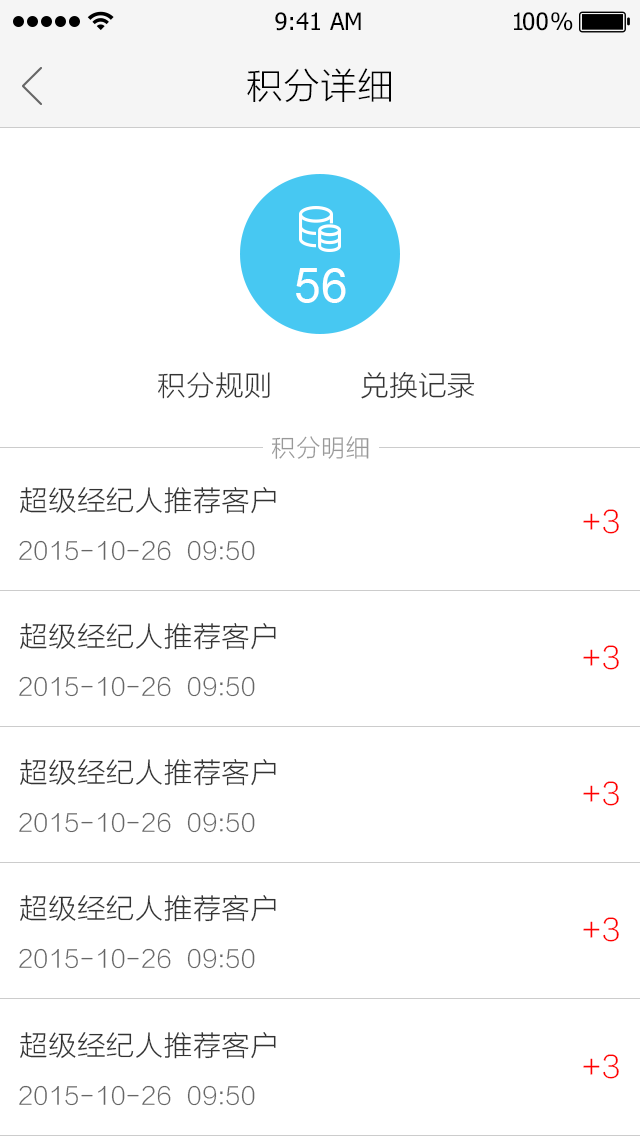
<style>
.page{position:relative;width:640px;height:1136px;background:#ffffff}
.page>*{position:absolute;margin:0}
.t1{font:24px "Tahoma";color:#000000}
.t2{font:24px "Tahoma";letter-spacing:-0.1em;color:#000000}
.t3{font:24px "Tahoma";letter-spacing:-0.25em;color:#000000}
.t4{font:36px "STHeitiSC-Light";color:#000000}
.t5{font:48px "ArialMT";color:#ffffff}
.t6{font:28px "STHeitiSC-Light";color:#333333}
.t7{font:24px "STHeitiSC-Light";color:#999999}
.t8{font:30px "STHeitiSC-Light";color:#ff0000}
.t9{font:24px "STHeitiSC-Light";color:#666666}
</style>
<div class="page">
<p class="t1" style="left:275px;top:12px;width:86px;height:19px">9:41 AM</p>
<p class="t2" style="left:514px;top:12px;width:59px;height:19px">1<span class="t1">0</span><span class="t3">0 </span>%</p>
<p class="t4" style="left:247px;top:68px;width:144px;height:35px">积分详细</p>
<p class="t5" style="left:296px;top:268px;width:50px;height:35px">56</p>
<p class="t6" style="left:158px;top:372px;width:112px;height:27px">积分规则</p>
<p class="t6" style="left:361px;top:372px;width:114px;height:27px">兑换记录</p>
<p class="t7" style="left:272px;top:436px;width:97px;height:23px">积分明细</p>
<p class="t6" style="left:20px;top:487px;width:256px;height:27px">超级经纪人推荐客户</p>
<p class="t8" style="left:583px;top:509px;width:36px;height:25px">+3</p>
<p class="t9" style="left:19px;top:540px;width:236px;height:21px">2015-10-26  09:50</p>
<p class="t6" style="left:20px;top:623px;width:256px;height:27px">超级经纪人推荐客户</p>
<p class="t8" style="left:583px;top:645px;width:36px;height:25px">+3</p>
<p class="t9" style="left:19px;top:676px;width:236px;height:21px">2015-10-26  09:50</p>
<p class="t6" style="left:20px;top:759px;width:256px;height:27px">超级经纪人推荐客户</p>
<p class="t8" style="left:583px;top:781px;width:36px;height:25px">+3</p>
<p class="t9" style="left:19px;top:812px;width:236px;height:21px">2015-10-26  09:50</p>
<p class="t6" style="left:20px;top:895px;width:256px;height:27px">超级经纪人推荐客户</p>
<p class="t8" style="left:583px;top:917px;width:36px;height:25px">+3</p>
<p class="t9" style="left:19px;top:948px;width:236px;height:21px">2015-10-26  09:50</p>
<p class="t6" style="left:20px;top:1032px;width:256px;height:27px">超级经纪人推荐客户</p>
<p class="t8" style="left:583px;top:1054px;width:36px;height:25px">+3</p>
<p class="t9" style="left:19px;top:1085px;width:236px;height:21px">2015-10-26  09:50</p>
</div>
